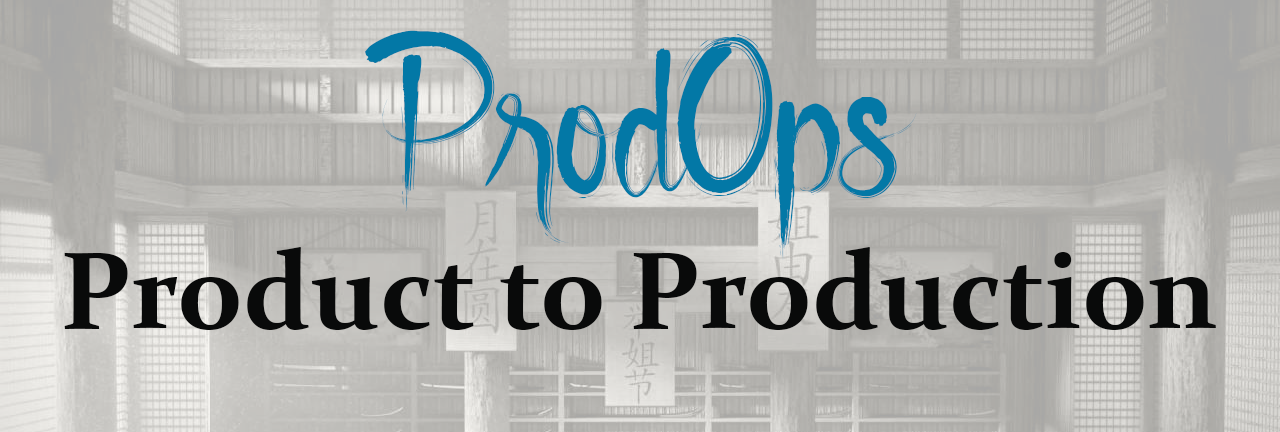
<style>
.page{position:relative;width:1280px;height:432px}
.page>*{position:absolute;margin:0}
.t1{font:250px "Godfeem";color:#0378a6}
.t2{font:110px "Constantia-Bold";color:#090a0a}
</style>
<div class="page">
<p class="t1" style="left:365px;top:30px;width:552px;height:230px">ProdOps</p>
<p class="t2" style="left:64px;top:247px;width:1152px;height:83px">Product to Production</p>
</div>
